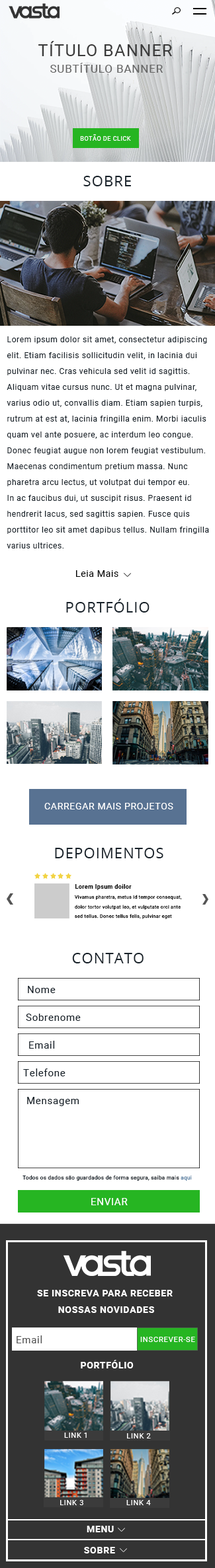
<style>
.page{position:relative;width:215px;height:1568px;background:#ffffff}
.page>*{position:absolute;margin:0}
.t1{font:16.7px "Roboto-Regular";letter-spacing:0.05em;color:#3b3b3b}
.t2{font:11.3px "Roboto-Regular";letter-spacing:0.05em;color:#676767}
.t3{font:6.1px "Roboto-Regular";letter-spacing:0.05em;color:#ffffff}
.t4{font:14.5px "OpenSans";letter-spacing:0.05em;color:#172129}
.t5{font:7.9px/4px "Roboto-Regular";letter-spacing:0.05em;color:#172129}
.t6{font:9.3px "Roboto-Regular";letter-spacing:0.05em;color:#000000}
.t7{font:9.3px "Roboto-Regular";letter-spacing:0.05em;color:#ffffff;text-transform:uppercase}
.t8{font:5.9px "Roboto-Bold";letter-spacing:0.05em;color:#000000}
.t9{font:4.7px/2.3px "Roboto-Regular";letter-spacing:0.05em;color:#000000}
.t10{font:9.9px "Roboto-Regular";letter-spacing:0.05em;color:#172129}
.t11{font:5.3px "Roboto-Regular";letter-spacing:0.05em;color:#172129}
.t12{font:5.3px "Roboto-Regular";letter-spacing:0.05em;color:#587fa2}
.t13{font:9.9px "Roboto-Regular";letter-spacing:0.05em;color:#ffffff}
.t14{font:9.3px/0.7px "Roboto-Bold";letter-spacing:0.05em;color:#ffffff}
.t15{font:9.9px "Roboto-Regular";letter-spacing:0.05em;color:#555555}
.t16{font:7.6px "Roboto-Regular";letter-spacing:0.05em;color:#ffffff}
.t17{font:9.3px "Roboto-Bold";letter-spacing:0.05em;color:#ffffff}
.t18{font:7.4px "Roboto-Regular";letter-spacing:0.05em;color:#ffffff}
.t19{font:7.5px "Roboto-Regular";letter-spacing:0.05em;color:#ffffff}
</style>
<div class="page">
<p class="t1" style="left:38px;top:41px;width:134px;height:15px">TÍTULO BANNER</p>
<p class="t2" style="left:50px;top:63px;width:113px;height:10px">SUBTÍTULO BANNER</p>
<p class="t3" style="left:80px;top:134px;width:51px;height:7px">BOTÃO DE CLICK</p>
<p class="t4" style="left:83px;top:176px;width:48px;height:10px">SOBRE</p>
<p class="t5" style="left:7px;top:336px;width:202px;height:212px">Lorem ipsum dolor sit amet, consectetur adipiscing<br>elit. Etiam facilisis sollicitudin velit, in lacinia dui<br>pulvinar nec. Cras vehicula sed velit id sagittis.<br>Aliquam vitae cursus nunc. Ut et magna pulvinar,<br>varius odio ut, convallis diam. Etiam sapien turpis,<br>rutrum at est at, lacinia fringilla enim. Morbi iaculis<br>quam vel ante posuere, ac interdum leo congue.<br>Donec feugiat augue non lorem feugiat vestibulum.<br>Maecenas condimentum pretium massa. Nunc<br>pharetra arcu lectus, ut volutpat dui tempor eu.<br>In ac faucibus dui, ut suscipit risus. Praesent id<br>hendrerit lacus, sed sagittis sapien. Fusce quis<br>porttitor leo sit amet dapibus tellus. Nullam fringilla<br>varius ultrices.</p>
<p class="t6" style="left:76px;top:570px;width:42px;height:7px">Leia Mais</p>
<p class="t4" style="left:66px;top:599px;width:83px;height:14px">PORTFÓLIO</p>
<p class="t7" style="left:44px;top:803px;width:129px;height:6px">Carregar Mais Projetos</p>
<p class="t4" style="left:55px;top:848px;width:108px;height:10px">DEPOIMENTOS</p>
<p class="t8" style="left:75px;top:884px;width:56px;height:6px">Lorem Ipsum doilor</p>
<p class="t9" style="left:74px;top:895px;width:108px;height:24px">Vivamus pharetra, metus id tempor consequat,<br>dolor tortor volutpat leo, et vulputate orci ante<br>sed tellus. Donec tellus felis, pulvinar eget</p>
<p class="t4" style="left:72px;top:953px;width:71px;height:10px">CONTATO</p>
<p class="t10" style="left:28px;top:986px;width:28px;height:7px">Nome</p>
<p class="t10" style="left:26px;top:1014px;width:55px;height:7px">Sobrenome</p>
<p class="t10" style="left:29px;top:1041px;width:26px;height:8px">Email</p>
<p class="t10" style="left:23px;top:1068px;width:42px;height:8px">Telefone</p>
<p class="t10" style="left:27px;top:1097px;width:52px;height:9px">Mensagem</p>
<p class="t11" style="left:22px;top:1175px;width:170px;height:6px">Todos os dados são guardados de forma segura, saiba mais <span class="t12">aqui</span></p>
<p class="t13" style="left:91px;top:1198px;width:37px;height:7px">ENVIAR</p>
<p class="t14" style="left:37px;top:1290px;width:135px;height:23px;text-align:center">SE INSCREVA PARA RECEBER <br>NOSSAS NOVIDADES</p>
<p class="t15" style="left:17px;top:1335px;width:25px;height:8px">Email</p>
<p class="t16" style="left:140px;top:1337px;width:55px;height:5px">INSCREVER-SE</p>
<p class="t17" style="left:81px;top:1360px;width:52px;height:8px">PORTFÓLIO</p>
<p class="t18" style="left:64px;top:1433px;width:23px;height:5px">LINK 1</p>
<p class="t16" style="left:127px;top:1433px;width:24px;height:5px">LINK 2</p>
<p class="t19" style="left:60px;top:1500px;width:23px;height:5px">LINK 3</p>
<p class="t19" style="left:126px;top:1500px;width:25px;height:5px">LINK 4</p>
<p class="t17" style="left:87px;top:1526px;width:27px;height:6px">MENU</p>
<p class="t17" style="left:84px;top:1547px;width:31px;height:6px">SOBRE</p>
</div>
